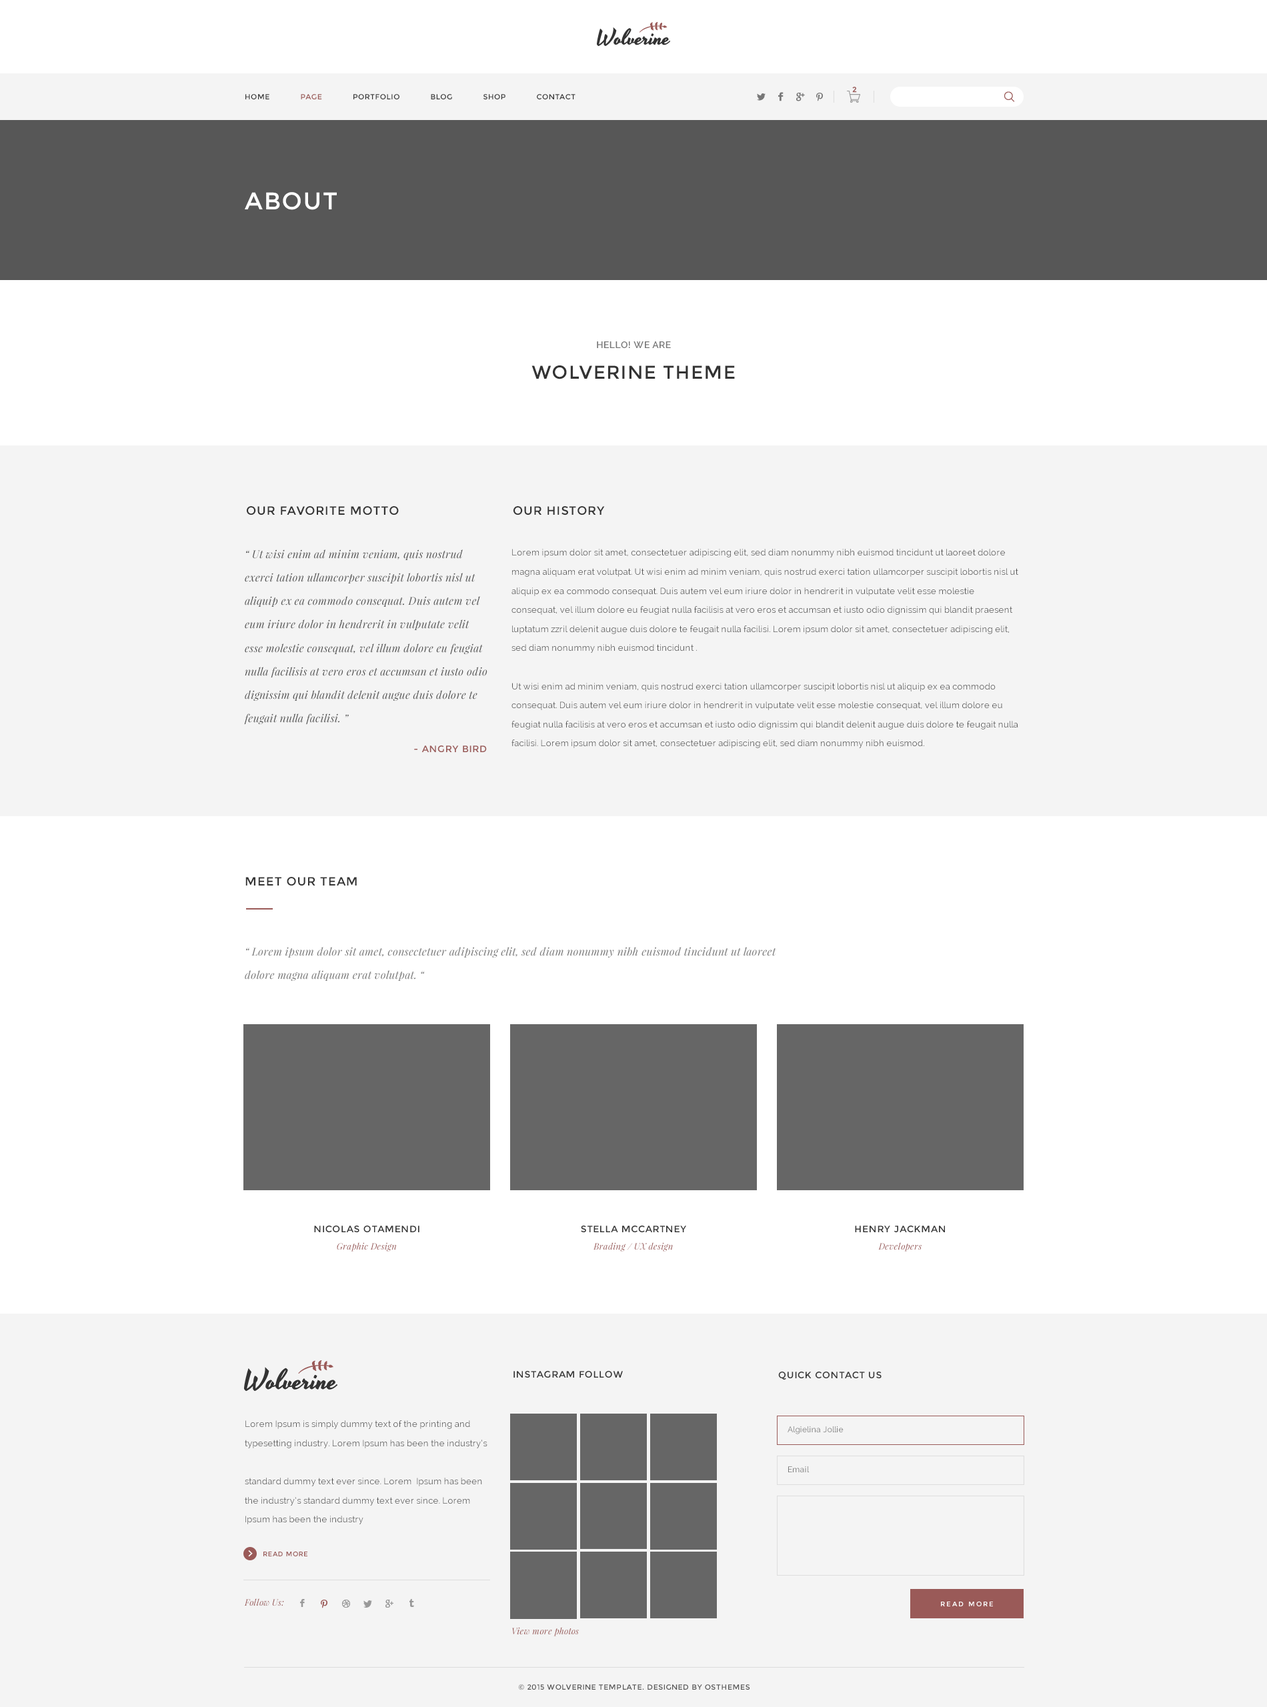
<style>
.page{position:relative;width:1267px;height:1707px;background:#f4f4f4}
.page>*{position:absolute;margin:0}
.t1{font:7.3px "Montserrat-Regular";color:#9a5a58;font-weight:bold}
.t2{font:7.3px "Montserrat-Regular";letter-spacing:0.05em;color:#333333}
.t3{font:7.3px "Montserrat-Regular";letter-spacing:0.05em;color:#9b5a57}
.t4{font:24px "Montserrat-Regular";letter-spacing:0.05em;color:#ffffff}
.t5{font:9.3px "Raleway-SemiBold";letter-spacing:0.05em;color:#777777}
.t6{font:18.7px "Montserrat-Regular";letter-spacing:0.05em;color:#333333}
.t7{font:12px "Montserrat-Regular";letter-spacing:0.05em;color:#333333}
.t8{font:10.7px/23.5px "PlayfairDisplay-Italic";letter-spacing:0.02em;color:#555555}
.t9{font:8.7px/19.1px "Raleway";letter-spacing:0.02em;color:#545454}
.t10{font:9.3px "Montserrat-Regular";letter-spacing:0.05em;color:#9a5a58}
.t11{font:10.7px/23.5px "PlayfairDisplay-Italic";letter-spacing:0.02em;color:#777777}
.t12{font:9.3px "Montserrat-Regular";letter-spacing:0.05em;color:#333333}
.t13{font:8.7px "PlayfairDisplay-Italic";letter-spacing:0.02em;color:#995958}
.t14{font:8.7px/19.1px "Raleway";letter-spacing:0.02em;color:#555555}
.t15{font:8px "Raleway";letter-spacing:0.02em;color:#777777}
.t16{font:6.7px "Montserrat-Regular";letter-spacing:0.05em;color:#9a5a58}
.t17{font:6.7px "Montserrat-Regular";letter-spacing:0.2em;color:#ffffff}
.t18{font:8.7px "PlayfairDisplay-Italic";letter-spacing:0.02em;color:#9a5a58}
.t19{font:7.3px "Montserrat-Regular";letter-spacing:0.05em;color:#555555}
</style>
<div class="page">
<p class="t1" style="left:852px;top:87px;width:5px;height:6px">2</p>
<p class="t2" style="left:245px;top:94px;width:330px;height:5px">HOME      <span class="t3">PAGE</span>      PORTFOLIO      BLOG      SHOP      CONTACT</p>
<p class="t4" style="left:245px;top:192px;width:92px;height:18px">ABOUT</p>
<p class="t5" style="left:597px;top:341px;width:74px;height:7px">HELLO! WE ARE</p>
<p class="t6" style="left:531px;top:365px;width:204px;height:14px">WOLVERINE THEME</p>
<p class="t7" style="left:247px;top:506px;width:152px;height:9px">OUR FAVORITE MOTTO</p>
<p class="t7" style="left:513px;top:506px;width:92px;height:9px">OUR HISTORY</p>
<p class="t8" style="left:244px;top:549px;width:243px;height:176px">“ Ut wisi enim ad minim veniam, quis nostrud exerci tation ullamcorper suscipit lobortis nisl ut aliquip ex ea commodo consequat. Duis autem vel eum iriure dolor in hendrerit in vulputate velit esse molestie consequat, vel illum dolore eu feugiat nulla facilisis at vero eros et accumsan et iusto odio dignissim qui blandit delenit augue duis dolore te feugait nulla facilisi. ”</p>
<p class="t9" style="left:511px;top:549px;width:507px;height:199px">Lorem ipsum dolor sit amet, consectetuer adipiscing elit, sed diam nonummy nibh euismod tincidunt ut laoreet dolore magna aliquam erat volutpat. Ut wisi enim ad minim veniam, quis nostrud exerci tation ullamcorper suscipit lobortis nisl ut aliquip ex ea commodo consequat. Duis autem vel eum iriure dolor in hendrerit in vulputate velit esse molestie consequat, vel illum dolore eu feugiat nulla facilisis at vero eros et accumsan et iusto odio dignissim qui blandit praesent luptatum zzril delenit augue duis dolore te feugait nulla facilisi. Lorem ipsum dolor sit amet, consectetuer adipiscing elit, sed diam nonummy nibh euismod tincidunt . <br><br>Ut wisi enim ad minim veniam, quis nostrud exerci tation ullamcorper suscipit lobortis nisl ut aliquip ex ea commodo consequat. Duis autem vel eum iriure dolor in hendrerit in vulputate velit esse molestie consequat, vel illum dolore eu feugiat nulla facilisis at vero eros et accumsan et iusto odio dignissim qui blandit delenit augue duis dolore te feugait nulla facilisi. Lorem ipsum dolor sit amet, consectetuer adipiscing elit, sed diam nonummy nibh euismod.</p>
<p class="t10" style="left:414px;top:745px;width:73px;height:7px">- ANGRY BIRD</p>
<p class="t7" style="left:245px;top:877px;width:112px;height:9px">MEET OUR TEAM</p>
<p class="t11" style="left:245px;top:947px;width:531px;height:34px">“ Lorem ipsum dolor sit amet, consectetuer adipiscing elit, sed diam nonummy nibh euismod tincidunt ut laoreet dolore magna aliquam erat volutpat. “</p>
<p class="t12" style="left:314px;top:1225px;width:105px;height:7px">NICOLAS OTAMENDI</p>
<p class="t12" style="left:581px;top:1225px;width:105px;height:7px">STELLA MCCARTNEY</p>
<p class="t12" style="left:855px;top:1225px;width:90px;height:7px">HENRY JACKMAN</p>
<p class="t13" style="left:337px;top:1242px;width:60px;height:9px">Graphic Design</p>
<p class="t13" style="left:593px;top:1242px;width:80px;height:9px">Brading / UX design</p>
<p class="t13" style="left:878px;top:1242px;width:43px;height:9px">Developers</p>
<p class="t12" style="left:513px;top:1371px;width:110px;height:6px">INSTAGRAM FOLLOW</p>
<p class="t12" style="left:778px;top:1371px;width:103px;height:8px">QUICK CONTACT US</p>
<p class="t14" style="left:245px;top:1420px;width:242px;height:104px">Lorem Ipsum is simply dummy text of the printing and typesetting industry. Lorem Ipsum has been the industry’s <br> <br>standard dummy text ever since. Lorem  Ipsum has been the industry’s standard dummy text ever since. Lorem  Ipsum has been the industry</p>
<p class="t15" style="left:787px;top:1426px;width:56px;height:8px">Algielina Jollie</p>
<p class="t15" style="left:788px;top:1466px;width:21px;height:6px">Email</p>
<p class="t16" style="left:263px;top:1551px;width:44px;height:5px">READ MORE</p>
<p class="t13" style="left:244px;top:1598px;width:40px;height:8px">Follow Us:</p>
<p class="t17" style="left:941px;top:1601px;width:52px;height:5px">READ MORE</p>
<p class="t18" style="left:512px;top:1627px;width:67px;height:9px">View more photos</p>
<p class="t19" style="left:518px;top:1684px;width:232px;height:6px">© 2015 WOLVERINE TEMPLATE. DESIGNED BY OSTHEMES</p>
</div>
